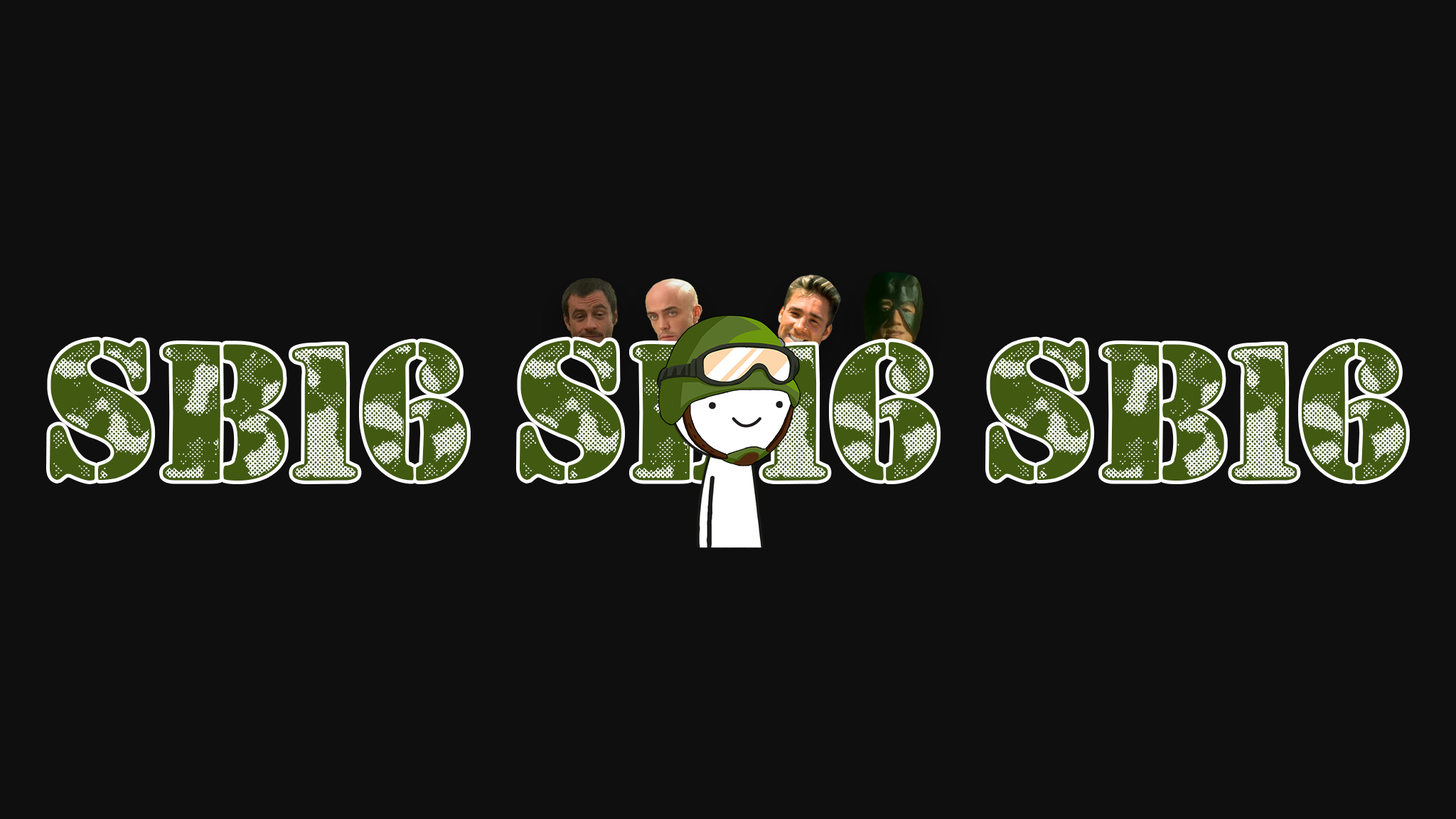
<style>
.page{position:relative;width:1456px;height:819px;background:#0f0f0f}
.page>*{position:absolute;margin:0}
.t1{font:173.5px "Camouflage-Woodland";color:#415910;text-transform:uppercase}
</style>
<div class="page">
<p class="t1" style="left:50px;top:340px;width:417px;height:141px">SB16</p>
<p class="t1" style="left:520px;top:340px;width:417px;height:141px">SB16</p>
<p class="t1" style="left:989px;top:340px;width:417px;height:141px">SB16</p>
</div>
